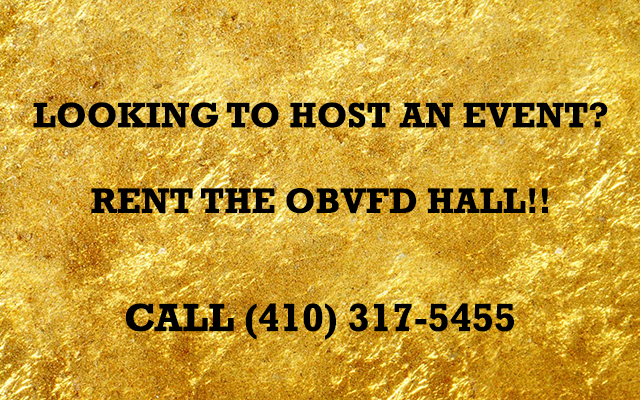
<style>
.page{position:relative;width:640px;height:400px}
.page>*{position:absolute;margin:0}
.t1{font:36px "Rockwell-Bold";color:#000000}
.t2{font:40px "Rockwell-Bold";color:#000000}
</style>
<div class="page">
<p class="t1" style="left:33px;top:102px;width:575px;height:26px">LOOKING TO HOST AN EVENT?</p>
<p class="t1" style="left:91px;top:188px;width:457px;height:26px">RENT THE OBVFD HALL!!</p>
<p class="t2" style="left:125px;top:303px;width:389px;height:37px">CALL (410) 317-5455</p>
</div>
